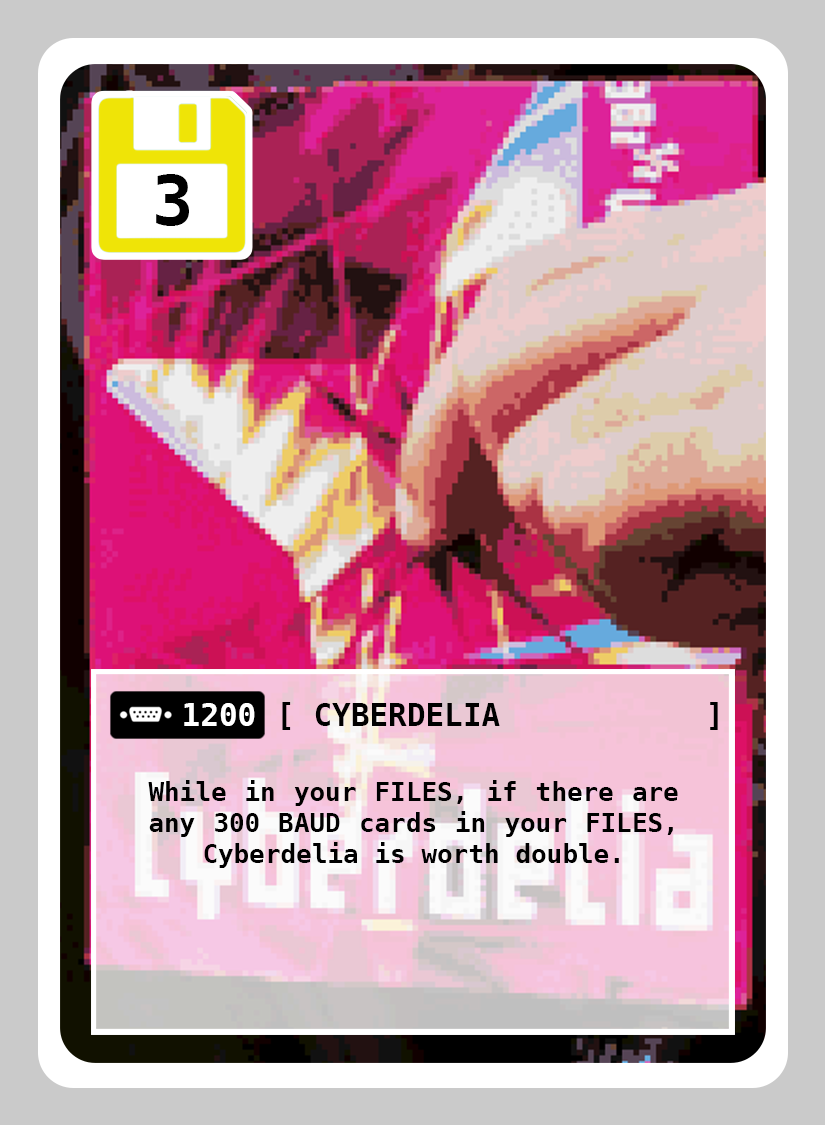
<style>
.page{position:relative;width:825px;height:1125px}
.page>*{position:absolute;margin:0}
.t1{font:69px "DejaVuSansMono-Bold";color:#000000}
.t2{font:31px "DejaVuSansMono-Bold";color:#ffffff}
.t3{font:31px "DejaVuSansMono-Bold";color:#000000}
.t4{font:26px "DejaVuSansMono-Bold";color:#000000}
</style>
<div class="page">
<p class="t1" style="left:156px;top:174px;width:33px;height:52px">3</p>
<p class="t2" style="left:184px;top:703px;width:71px;height:23px">1200</p>
<p class="t3" style="left:315px;top:703px;width:185px;height:23px">CYBERDELIA</p>
<p class="t4" style="left:148px;top:780px;width:530px;height:88px;text-align:justify">While in your FILES, if there are any 300 BAUD cards in your FILES, Cyberdelia is worth double.</p>
</div>
